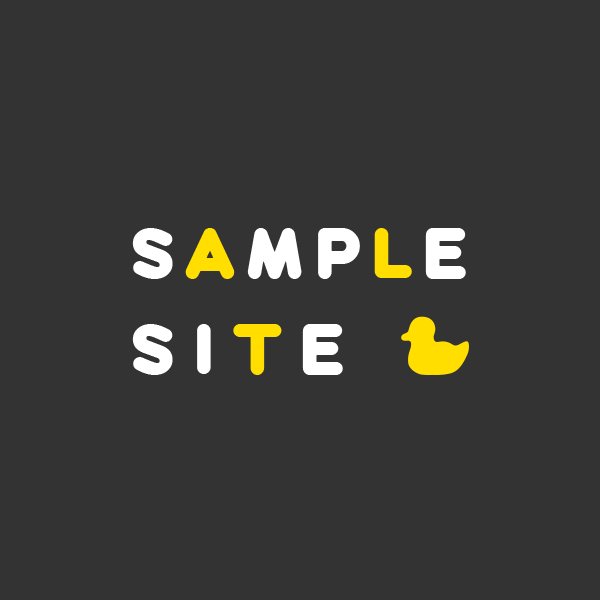
<style>
.page{position:relative;width:600px;height:600px;background:#333333}
.page>*{position:absolute;margin:0}
.t1{font:78.2px/96.1px "BeHappyBlack";letter-spacing:0.1em;color:#ffffff}
.t2{font:78.2px/96.1px "BeHappyBlack";letter-spacing:0.1em;color:#ffde00}
.t3{font:78.2px/96.1px "BeHappyBlack";letter-spacing:0.2em;color:#ffffff}
.t4{font:78.2px/96.1px "BeHappyBlack";letter-spacing:0.2em;color:#ffde00}
</style>
<div class="page">
<p class="t1" style="left:132px;top:228px;width:334px;height:147px">S<span class="t2">A</span>MP<span class="t2">L</span>E<br><span class="t3">SI</span><span class="t4">T</span><span class="t3">E</span></p>
</div>
